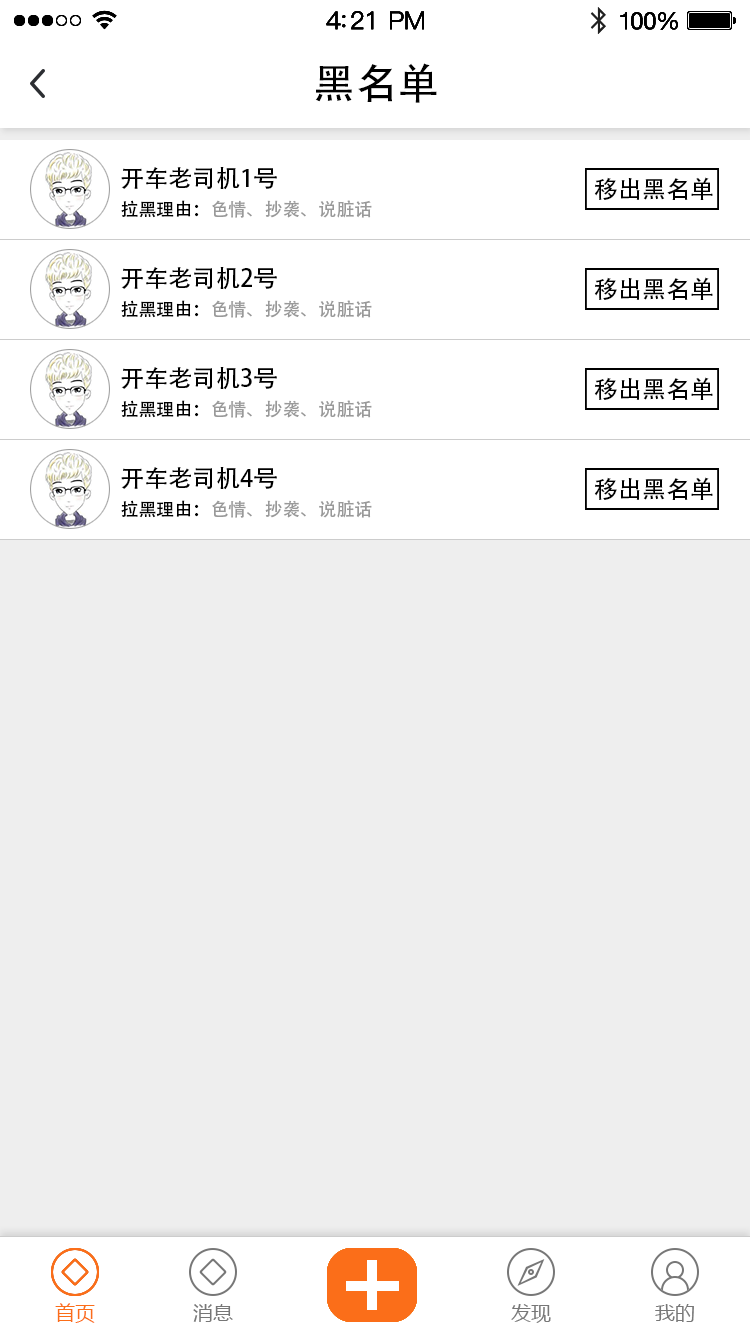
<style>
.page{position:relative;width:750px;height:1334px;background:#eeeeee}
.page>*{position:absolute;margin:0}
.t1{font:42px "AdobeHeitiStd-Regular";color:#000000}
.t2{font:24px "AdobeHeitiStd-Regular";color:#000000}
.t3{font:18px "AdobeHeitiStd-Regular";color:#999999}
.t4{font:18px "AdobeHeitiStd-Regular";color:#000000}
.t5{font:20px "MicrosoftYaHei";color:#fb6e19}
.t6{font:20px "MicrosoftYaHei";color:#777777}
</style>
<div class="page">
<p class="t1" style="left:315px;top:63px;width:122px;height:40px">黑名单</p>
<p class="t2" style="left:121px;top:167px;width:156px;height:23px">开车老司机1号</p>
<p class="t2" style="left:594px;top:177px;width:119px;height:23px">移出黑名单</p>
<p class="t3" style="left:121px;top:200px;width:251px;height:18px"><span class="t4">拉黑理由：</span>色情、抄袭、说脏话</p>
<p class="t2" style="left:121px;top:267px;width:156px;height:23px">开车老司机2号</p>
<p class="t2" style="left:594px;top:277px;width:119px;height:23px">移出黑名单</p>
<p class="t3" style="left:121px;top:300px;width:251px;height:18px"><span class="t4">拉黑理由：</span>色情、抄袭、说脏话</p>
<p class="t2" style="left:121px;top:367px;width:156px;height:23px">开车老司机3号</p>
<p class="t2" style="left:594px;top:377px;width:119px;height:23px">移出黑名单</p>
<p class="t3" style="left:121px;top:400px;width:251px;height:18px"><span class="t4">拉黑理由：</span>色情、抄袭、说脏话</p>
<p class="t2" style="left:121px;top:467px;width:156px;height:23px">开车老司机4号</p>
<p class="t2" style="left:594px;top:477px;width:119px;height:23px">移出黑名单</p>
<p class="t3" style="left:121px;top:500px;width:251px;height:18px"><span class="t4">拉黑理由：</span>色情、抄袭、说脏话</p>
<p class="t5" style="left:55px;top:1303px;width:40px;height:20px">首页</p>
<p class="t6" style="left:193px;top:1304px;width:40px;height:18px">消息</p>
<p class="t6" style="left:511px;top:1304px;width:40px;height:19px">发现</p>
<p class="t6" style="left:655px;top:1304px;width:39px;height:18px">我的</p>
</div>
